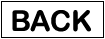
<style>
.page{position:relative;width:105px;height:39px;background:#ffffff}
.page>*{position:absolute;margin:0}
.t1{font:28.8px "ArialRoundedMTBold";color:#000000}
</style>
<div class="page">
<p class="t1" style="left:12px;top:10px;width:79px;height:22px">BACK</p>
</div>
